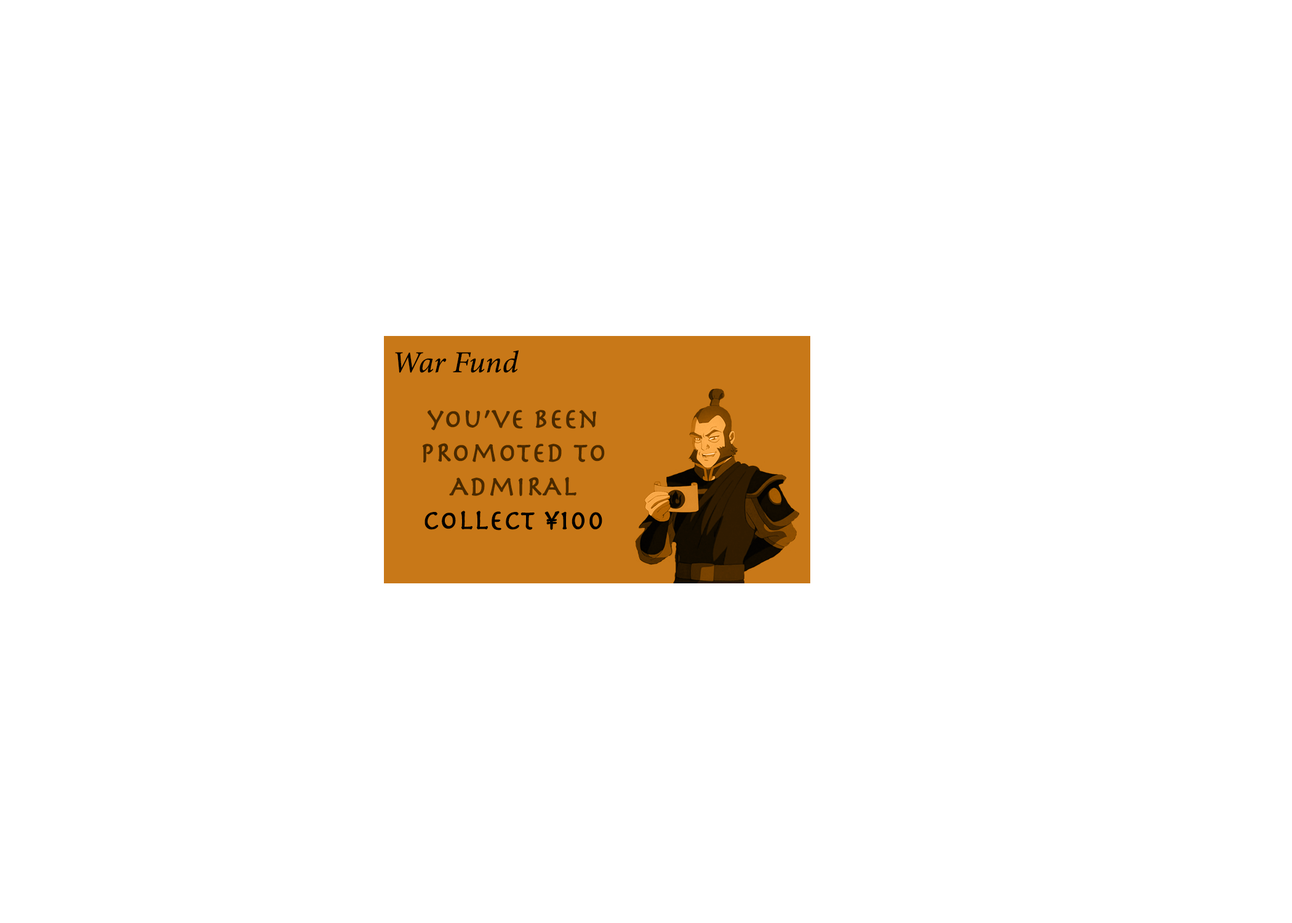
<style>
.page{position:relative;width:1292px;height:923px;background:#ffffff}
.page>*{position:absolute;margin:0}
.t1{font:30.8px "MinionConceptItalic-MediumItalic";color:#000000;font-weight:bold}
.t2{font:28.2px "Herculanum";color:#4d310e;font-weight:bold}
.t3{font:28.2px "Herculanum";color:#000000;font-weight:bold}
</style>
<div class="page">
<p class="t1" style="left:395px;top:350px;width:124px;height:23px">War Fund</p>
<p class="t2" style="left:422px;top:410px;width:183px;height:120px;text-align:center">you’ve been<br>pRomoted to<br>AdmiRAL<br><span class="t3">collect ¥100</span></p>
</div>
